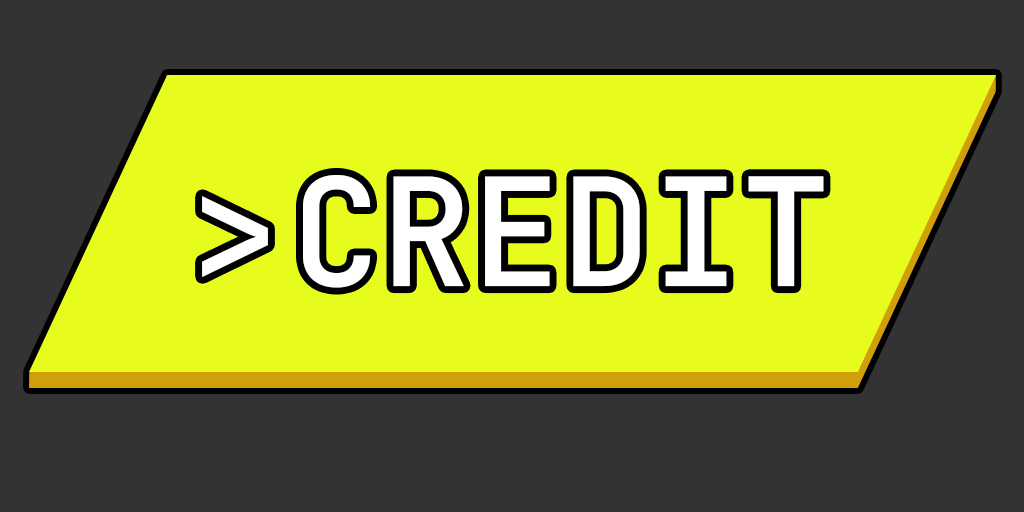
<style>
.page{position:relative;width:1024px;height:512px;background:#333333}
.page>*{position:absolute;margin:0}
.t1{font:150px "JetBrainsMonoRoman-Medium";color:#ffffff}
</style>
<div class="page">
<p class="t1" style="left:202px;top:175px;width:622px;height:113px">CREDIT</p>
</div>
